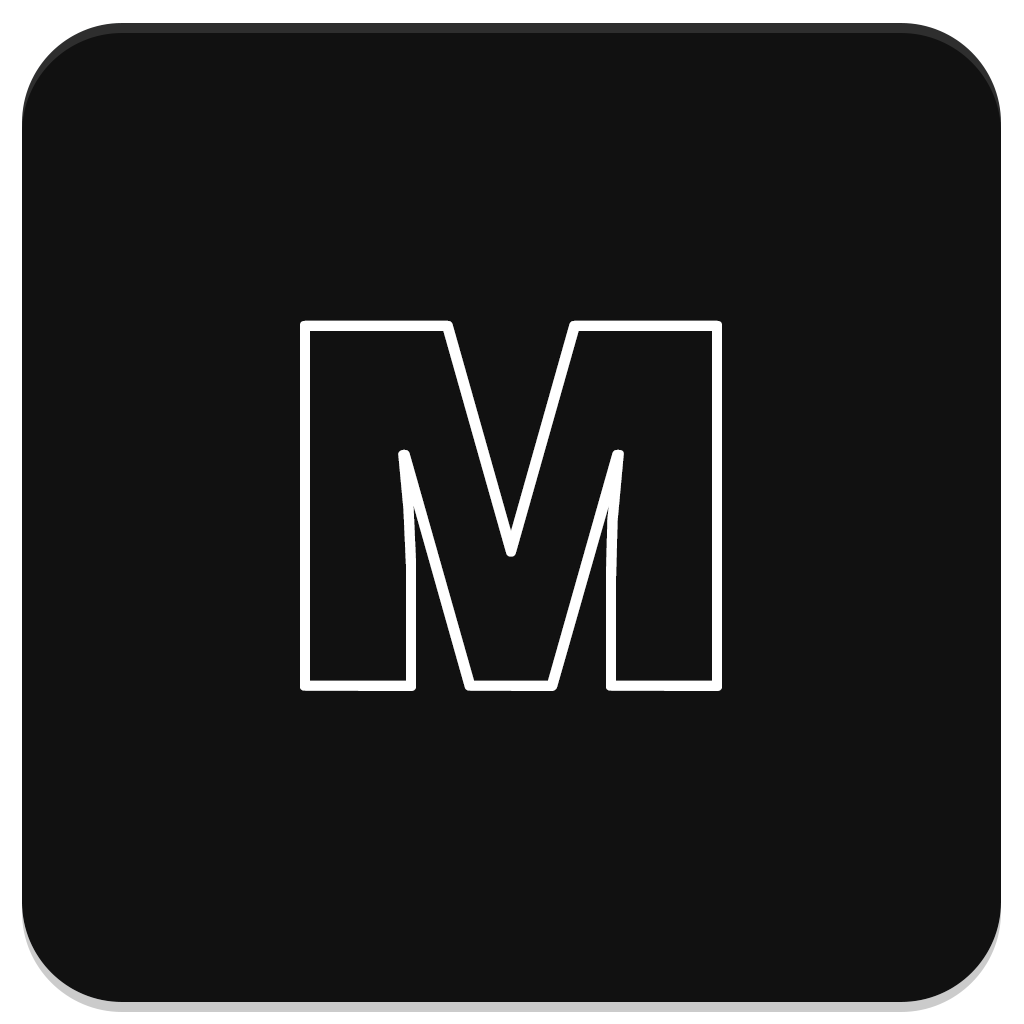
<style>
.page{position:relative;width:1024px;height:1024px;background:#111111}
.page>*{position:absolute;margin:0}
.t1{font:500px "Helvetica-BlackHo-Black";color:#ffffff}
</style>
<div class="page">
<p class="t1" style="left:300px;top:320px;width:422px;height:371px">M</p>
</div>
